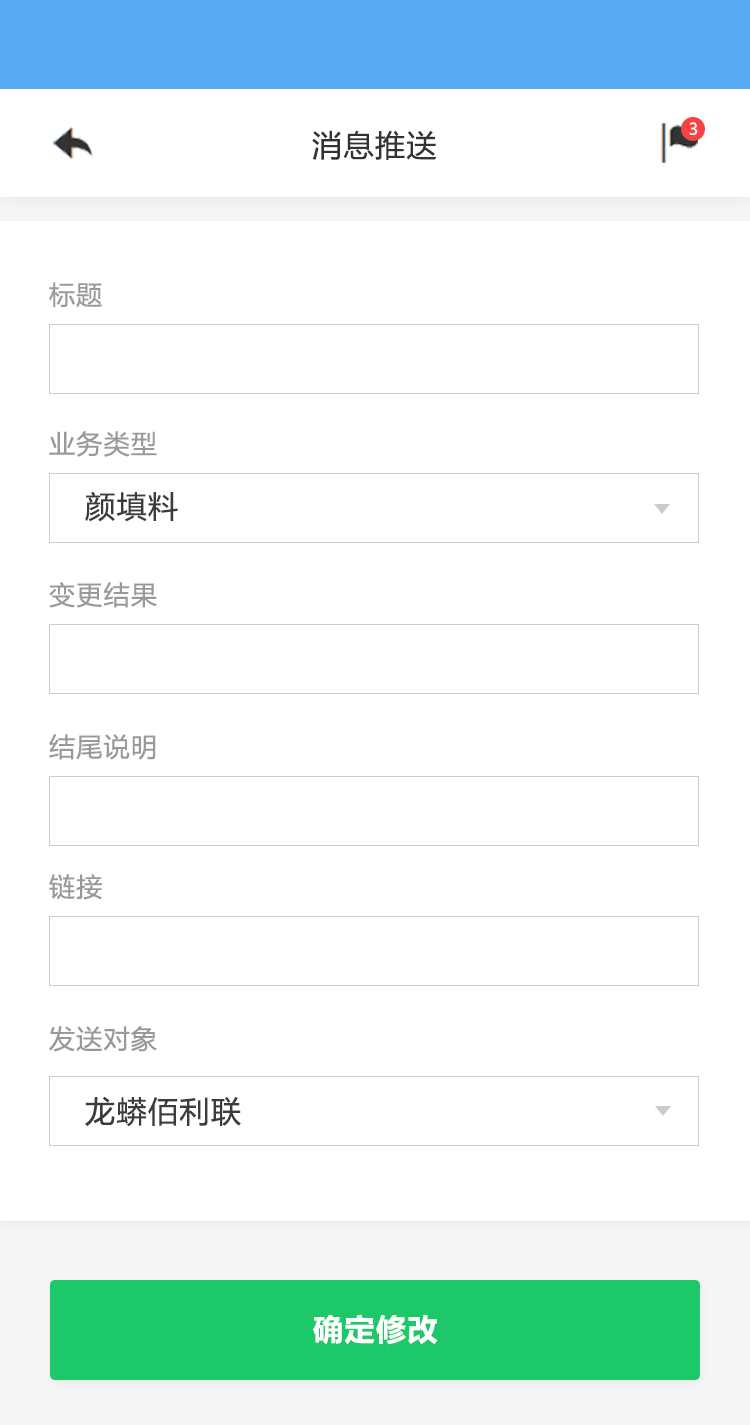
<style>
.page{position:relative;width:750px;height:1425px;background:#ffffff}
.page>*{position:absolute;margin:0}
.t1{font:16px "MicrosoftYaHeiUI";color:#ffffff}
.t2{font:30px "MicrosoftYaHeiUI";letter-spacing:0.05em;color:#333333}
.t3{font:26px "MicrosoftYaHeiUI";letter-spacing:0.05em;color:#999999}
.t4{font:30px "MicrosoftYaHeiUI";letter-spacing:0.05em;color:#3c3c3c}
.t5{font:30px "MicrosoftYaHeiUI-Bold";letter-spacing:0.05em;color:#ffffff}
</style>
<div class="page">
<p class="t1" style="left:689px;top:122px;width:9px;height:13px">3</p>
<p class="t2" style="left:312px;top:130px;width:125px;height:30px">消息推送</p>
<p class="t3" style="left:49px;top:282px;width:53px;height:26px">标题</p>
<p class="t3" style="left:49px;top:431px;width:108px;height:26px">业务类型</p>
<p class="t4" style="left:85px;top:491px;width:93px;height:31px">颜填料</p>
<p class="t3" style="left:49px;top:582px;width:108px;height:26px">变更结果</p>
<p class="t3" style="left:49px;top:734px;width:107px;height:26px">结尾说明</p>
<p class="t3" style="left:49px;top:874px;width:53px;height:26px">链接</p>
<p class="t3" style="left:49px;top:1026px;width:108px;height:26px">发送对象</p>
<p class="t4" style="left:85px;top:1096px;width:156px;height:31px">龙蟒佰利联</p>
<p class="t5" style="left:313px;top:1314px;width:125px;height:31px">确定修改</p>
</div>
